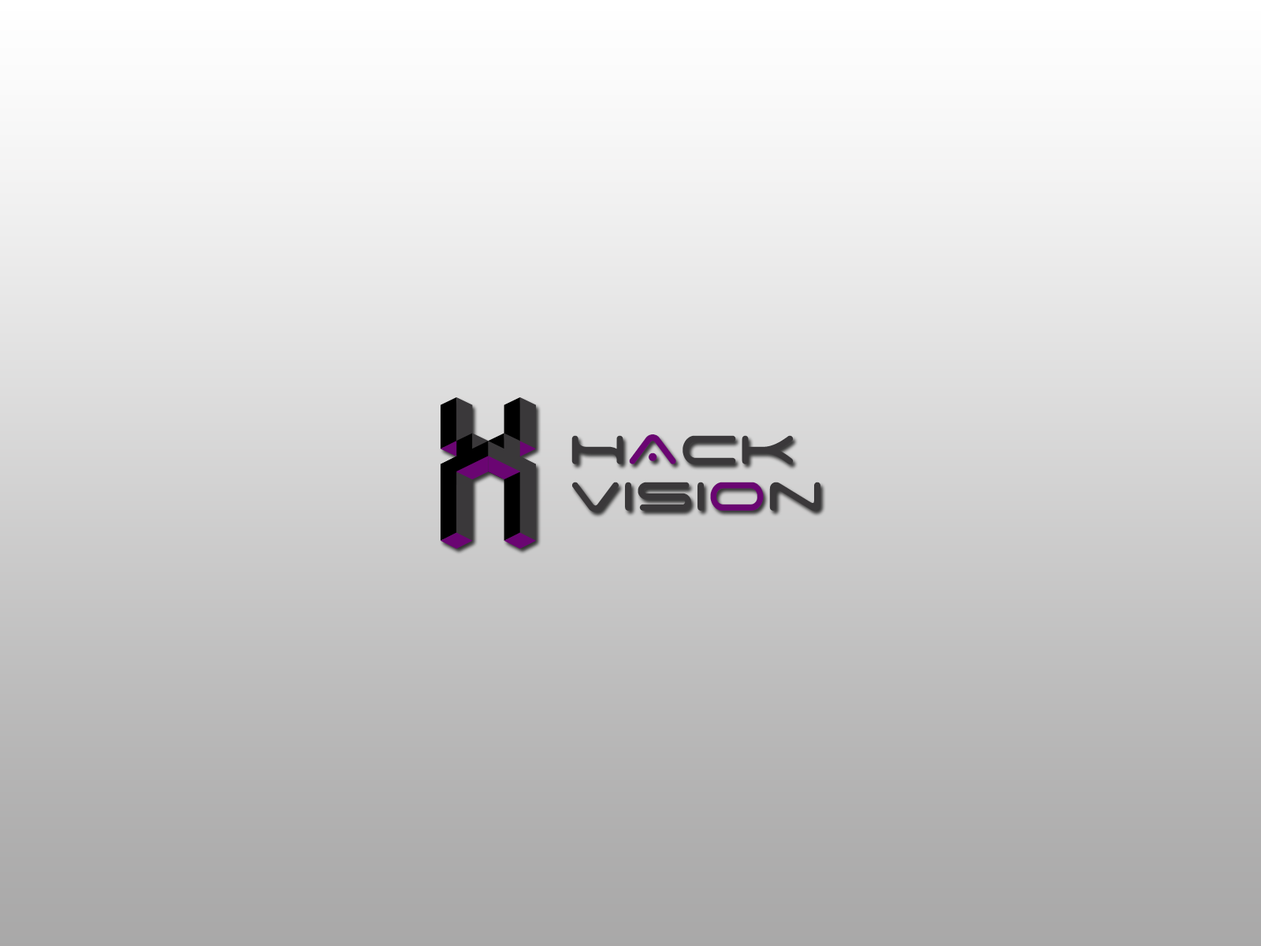
<style>
.page{position:relative;width:1261px;height:946px}
.page>*{position:absolute;margin:0}
.t1{font:65.2px "SpaceAgeRUSBYLYAJKA";color:#3a383a}
.t2{font:65.2px "SpaceAgeRUSBYLYAJKA";color:#6a0572}
</style>
<div class="page">
<p class="t1" style="left:571px;top:434px;width:223px;height:30px">H<span class="t2">A</span>CK</p>
<p class="t1" style="left:572px;top:482px;width:248px;height:30px">Visi<span class="t2">o</span>n</p>
</div>
